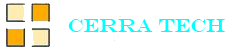
<style>
.page{position:relative;width:250px;height:50px;background:#ffffff}
.page>*{position:absolute;margin:0}
.t1{font:18.7px "EngraversMT";color:#00ffff}
</style>
<div class="page">
<p class="t1" style="left:68px;top:19px;width:157px;height:13px">CERRA TECH</p>
</div>
